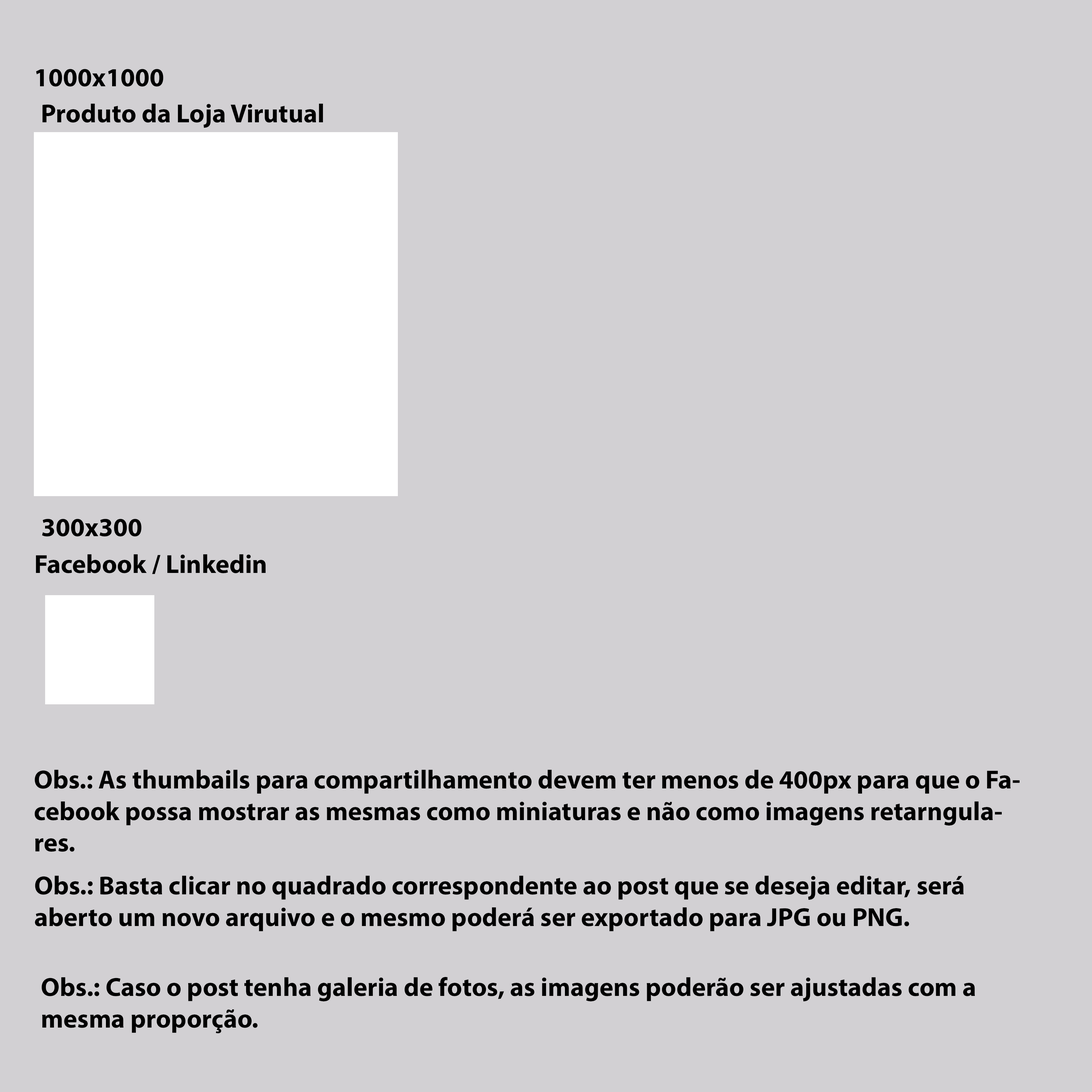
<style>
.page{position:relative;width:1092px;height:1092px;background:#d2d0d3}
.page>*{position:absolute;margin:0}
.t1{font:26.2px "MyriadPro-Bold";color:#000000}
</style>
<div class="page">
<p class="t1" style="left:36px;top:69px;width:127px;height:18px">1000x1000</p>
<p class="t1" style="left:42px;top:103px;width:281px;height:25px">Produto da Loja Virutual</p>
<p class="t1" style="left:42px;top:519px;width:100px;height:18px">300x300</p>
<p class="t1" style="left:36px;top:554px;width:230px;height:20px">Facebook / Linkedin</p>
<p class="t1" style="left:35px;top:769px;width:985px;height:83px">Obs.: As thumbails para compartilhamento devem ter menos de 400px para que o Facebook possa mostrar as mesmas como miniaturas e não como imagens retarngulares.</p>
<p class="t1" style="left:35px;top:875px;width:929px;height:56px">Obs.: Basta clicar no quadrado correspondente ao post que se deseja editar, será aberto um novo arquivo e o mesmo poderá ser exportado para JPG ou PNG.</p>
<p class="t1" style="left:41px;top:977px;width:934px;height:56px">Obs.: Caso o post tenha galeria de fotos, as imagens poderão ser ajustadas com a mesma proporção.</p>
</div>
